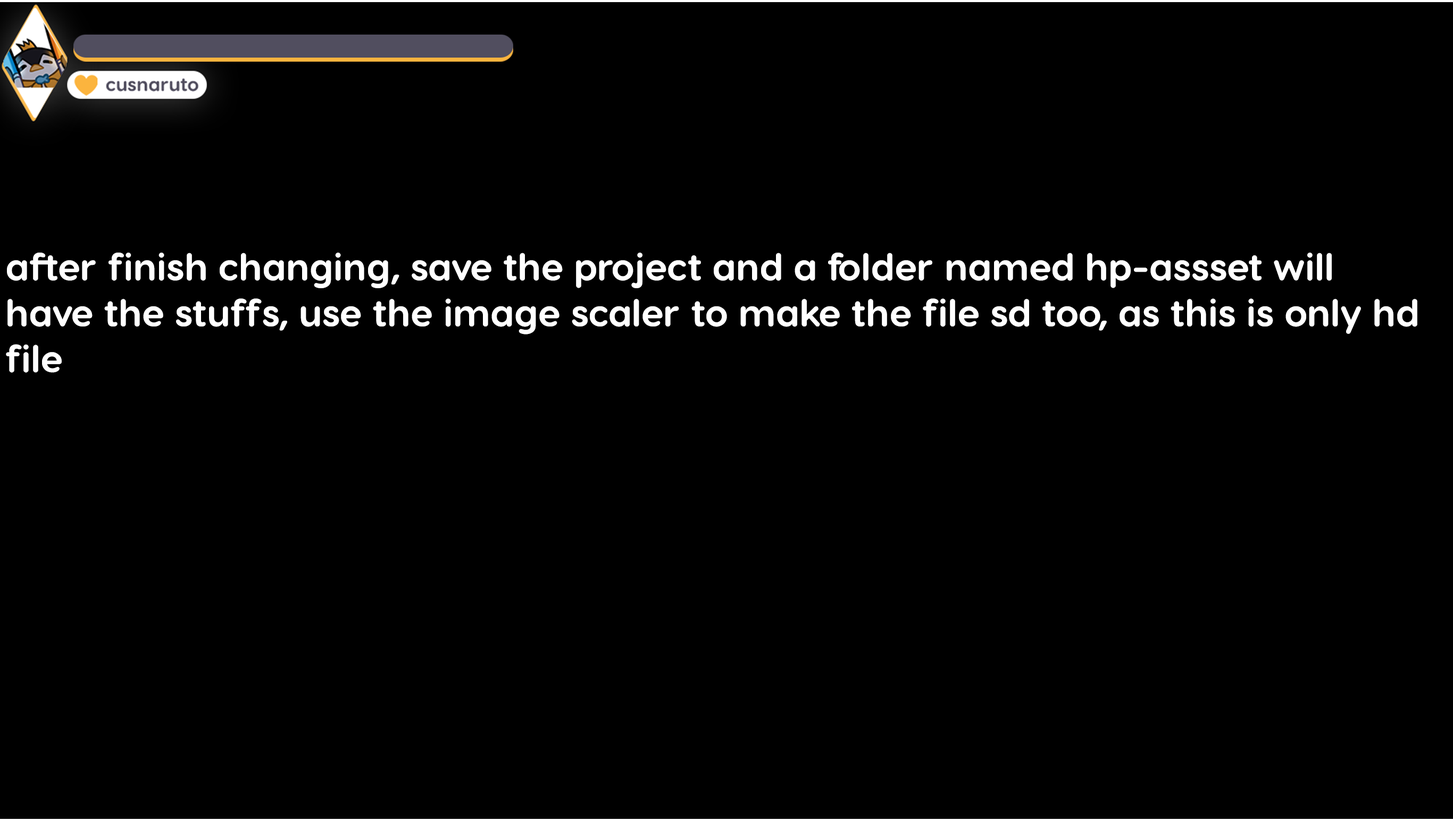
<style>
.page{position:relative;width:1453px;height:821px;background:#000000}
.page>*{position:absolute;margin:0}
.t1{font:38.3px "VisbyRoundCF-Bold";color:#ffffff}
</style>
<div class="page">
<p class="t1" style="left:6px;top:253px;width:1411px;height:120px">after finish changing, save the project and a folder named hp-assset will have the stuffs, use the image scaler to make the file sd too, as this is only hd file</p>
</div>
